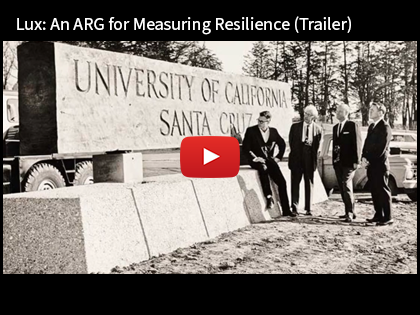
<style>
.page{position:relative;width:420px;height:315px;background:#000000}
.page>*{position:absolute;margin:0}
.t1{font:18px "SourceSansPro-Regular";color:#ffffff}
</style>
<div class="page">
<p class="t1" style="left:17px;top:16px;width:334px;height:19px">Lux: An ARG for Measuring Resilience (Trailer)</p>
</div>
